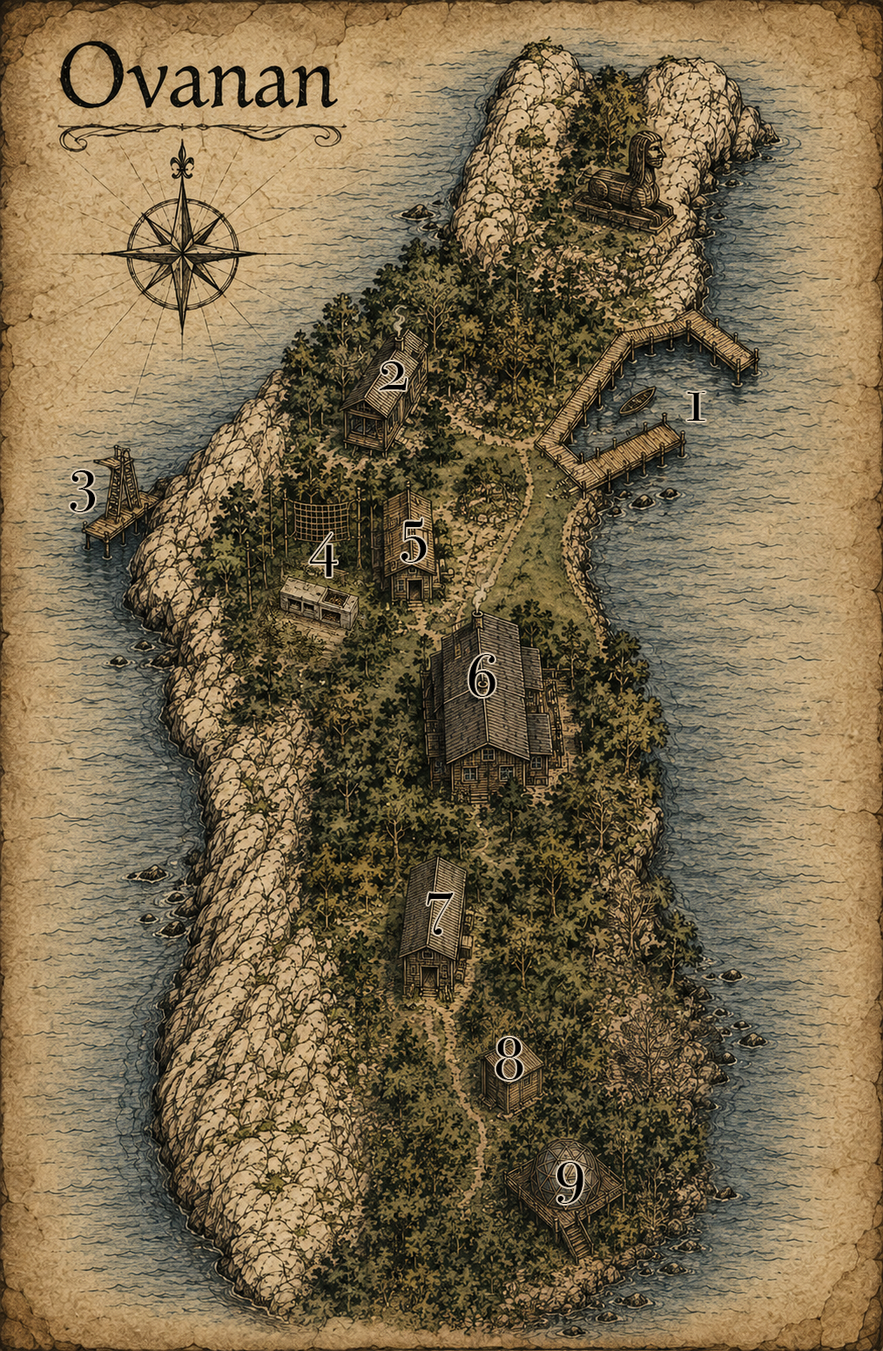
<style>
.page{position:relative;width:883px;height:1351px}
.page>*{position:absolute;margin:0}
.t1{font:62.7px "BodoniSvtyTwoSCITCTT-Book";letter-spacing:0.1em;color:#000000}
</style>
<div class="page">
<p class="t1" style="left:379px;top:361px;width:28px;height:29px">2</p>
<p class="t1" style="left:687px;top:392px;width:18px;height:29px">1</p>
<p class="t1" style="left:70px;top:470px;width:25px;height:42px">3</p>
<p class="t1" style="left:401px;top:518px;width:26px;height:45px">5</p>
<p class="t1" style="left:309px;top:533px;width:28px;height:43px">4</p>
<p class="t1" style="left:468px;top:654px;width:27px;height:43px">6</p>
<p class="t1" style="left:427px;top:893px;width:27px;height:41px">7</p>
<p class="t1" style="left:495px;top:1037px;width:28px;height:43px">8</p>
<p class="t1" style="left:557px;top:1162px;width:26px;height:41px">9</p>
</div>
